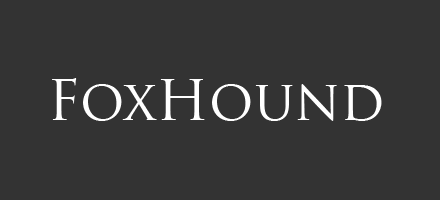
<style>
.page{position:relative;width:440px;height:200px;background:#333333}
.page>*{position:absolute;margin:0}
.t1{font:55px "TrajanPro-Regular";color:#ffffff}
</style>
<div class="page">
<p class="t1" style="left:52px;top:78px;width:330px;height:43px">FoxHound</p>
</div>
